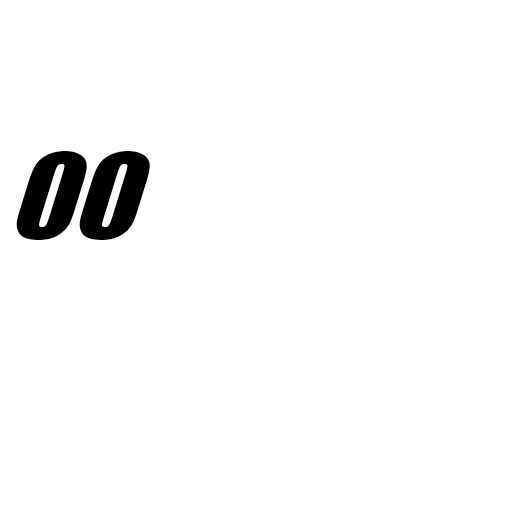
<style>
.page{position:relative;width:512px;height:512px;background:#ffffff}
.page>*{position:absolute;margin:0}
.t1{font:112.8px "Impact";color:#000000;scale:1.05 1}
</style>
<div class="page">
<p class="t1" style="left:16px;top:151px;width:134px;height:89px">00</p>
</div>
